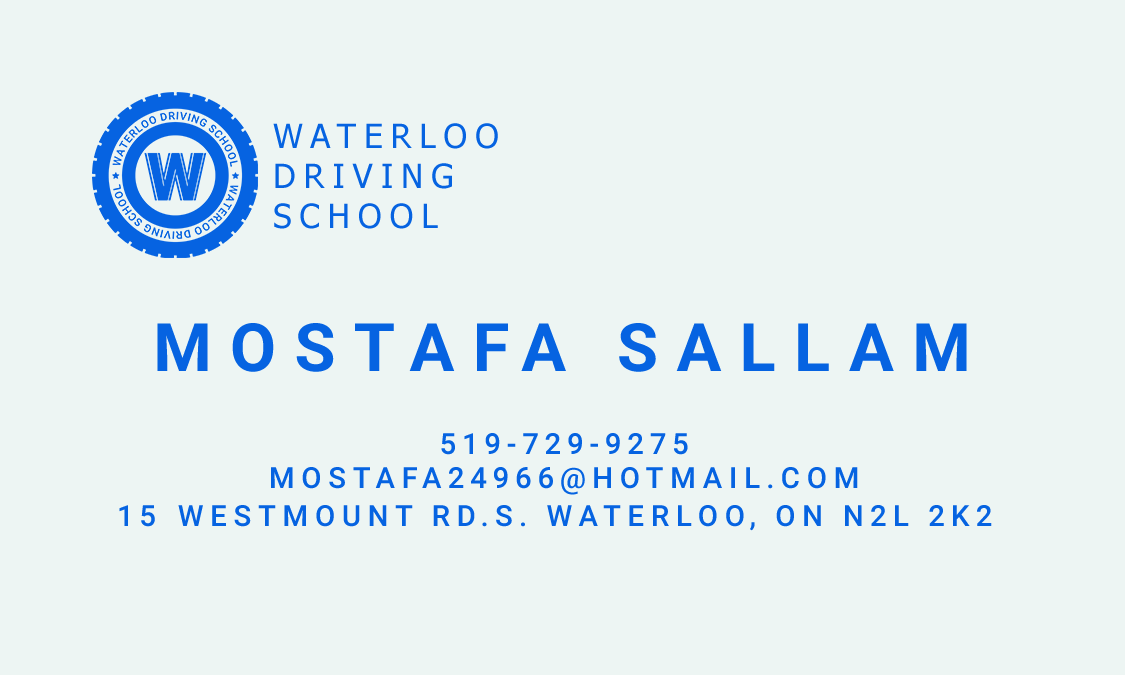
<style>
.page{position:relative;width:1125px;height:675px;background:#edf5f3}
.page>*{position:absolute;margin:0}
.t1{font:33.3px "Tahoma";letter-spacing:0.24em;color:#0663e1;text-transform:uppercase}
.t2{font:66.7px "Roboto-Bold";letter-spacing:0.24em;color:#0663e1;text-transform:uppercase}
.t3{font:29.2px "Roboto-Medium";letter-spacing:0.2em;color:#0663e1;text-transform:uppercase}
</style>
<div class="page">
<p class="t1" style="left:273px;top:123px;width:225px;height:106px;text-align:right">Waterloo<br>Driving<br>School</p>
<p class="t2" style="left:157px;top:323px;width:810px;height:49px">Mostafa Sallam</p>
<p class="t3" style="left:441px;top:433px;width:247px;height:22px">519-729-9275</p>
<p class="t3" style="left:271px;top:467px;width:587px;height:28px">Mostafa24966@Hotmail.com</p>
<p class="t3" style="left:119px;top:505px;width:873px;height:26px">15-westmount Rd.S. Waterloo, On N2L 2K2</p>
</div>
